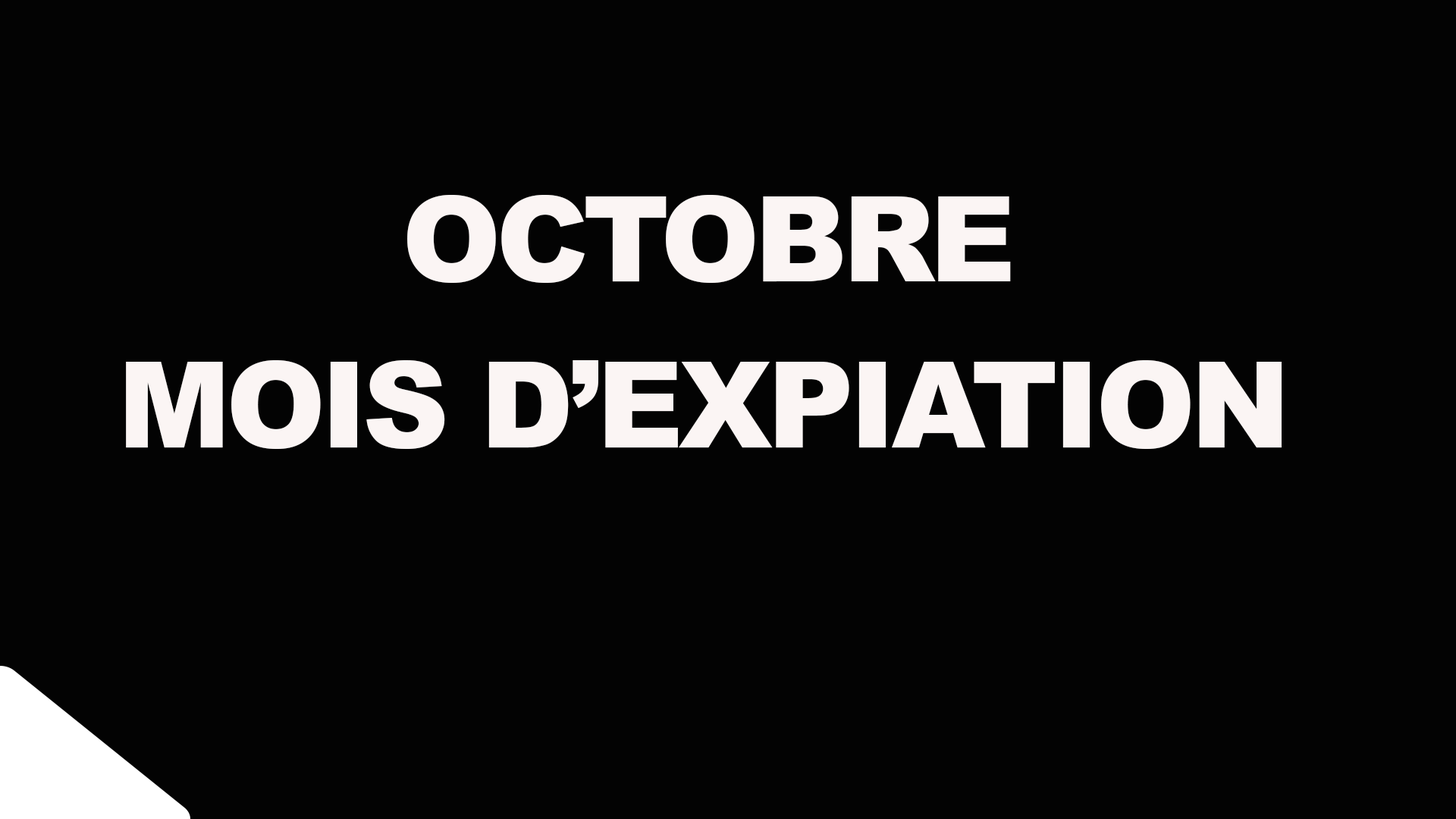
<style>
.page{position:relative;width:1456px;height:819px;background:#030303}
.page>*{position:absolute;margin:0}
.t1{font:118.8px "Arial-Black";letter-spacing:-0.04em;color:#fbf5f4}
.t2{font:120.1px "Arial-Black";letter-spacing:-0.04em;color:#fbf5f4}
</style>
<div class="page">
<p class="t1" style="left:407px;top:195px;width:604px;height:88px">OCTOBRE</p>
<p class="t2" style="left:126px;top:360px;width:1156px;height:89px">MOIS D’EXPIATION</p>
</div>
